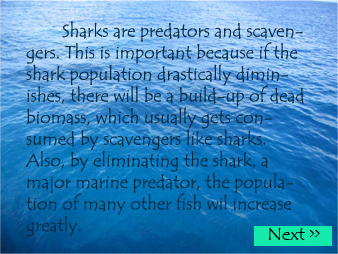
<style>
.page{position:relative;width:338px;height:254px}
.page>*{position:absolute;margin:0}
.t1{font:18px "TempusSansITC";color:#072d46}
</style>
<div class="page">
<p class="t1" style="left:25px;top:21px;width:279px;height:216px">Sharks are predators and scavengers. This is important because if the shark population drastically diminishes, there will be a build-up of dead biomass, which usually gets consumed by scavengers like sharks. Also, by eliminating the shark, a major marine predator, the population of many other fish wil increase greatly.</p>
</div>
